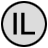
<style>
.page{position:relative;width:48px;height:48px;background:#dcdcdc}
.page>*{position:absolute;margin:0}
.t1{font:30px "ArialMT";color:#000000}
</style>
<div class="page">
<p class="t1" style="left:13px;top:12px;width:22px;height:23px">IL</p>
</div>
